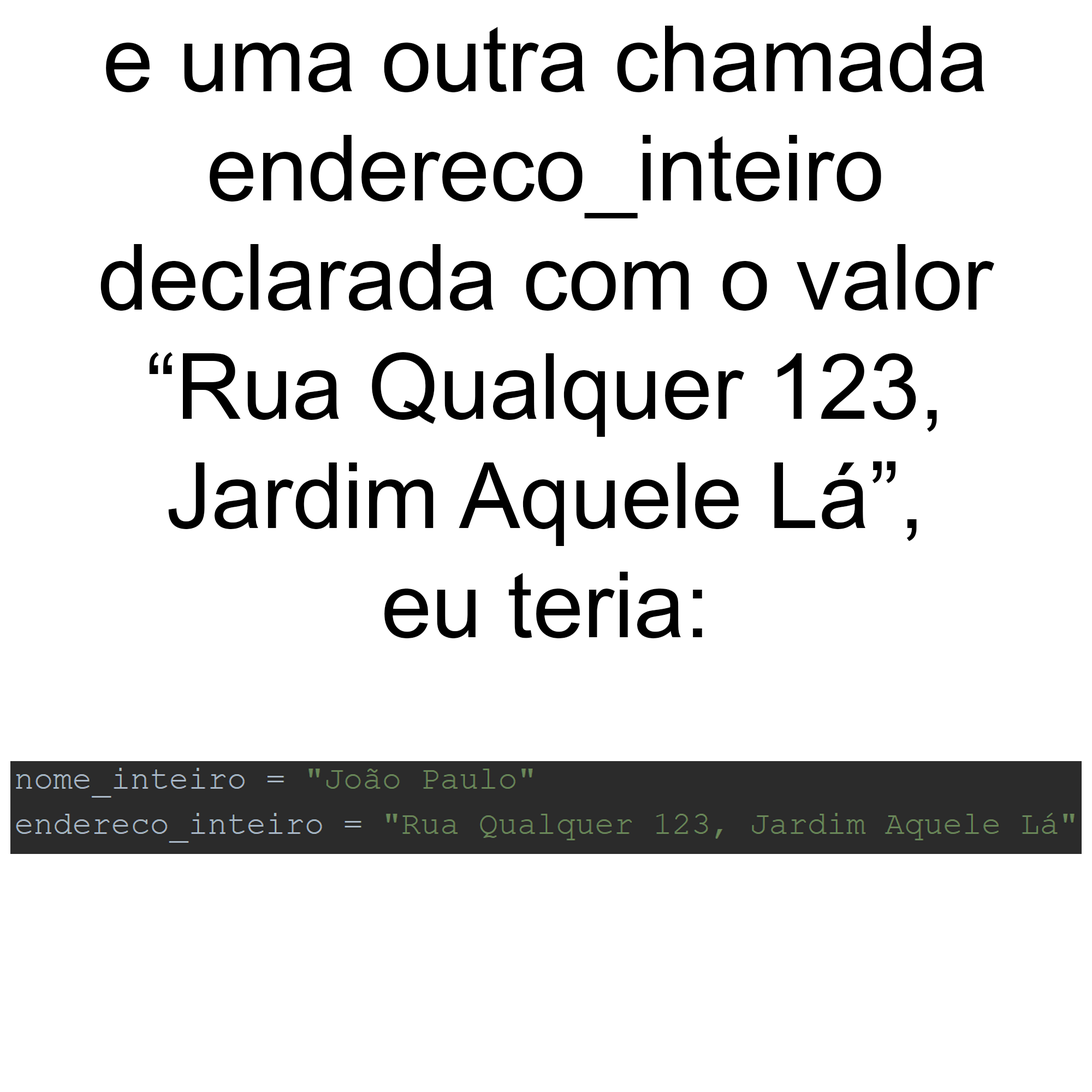
<style>
.page{position:relative;width:1092px;height:1092px;background:#ffffff}
.page>*{position:absolute;margin:0}
.t1{font:91px "ArialMT";color:#000000}
</style>
<div class="page">
<p class="t1" style="left:100px;top:26px;width:894px;height:612px;text-align:center">e uma outra chamada<br>endereco_inteiro<br>declarada com o valor<br>“Rua Qualquer 123,<br>Jardim Aquele Lá”,<br>eu teria:</p>
</div>
